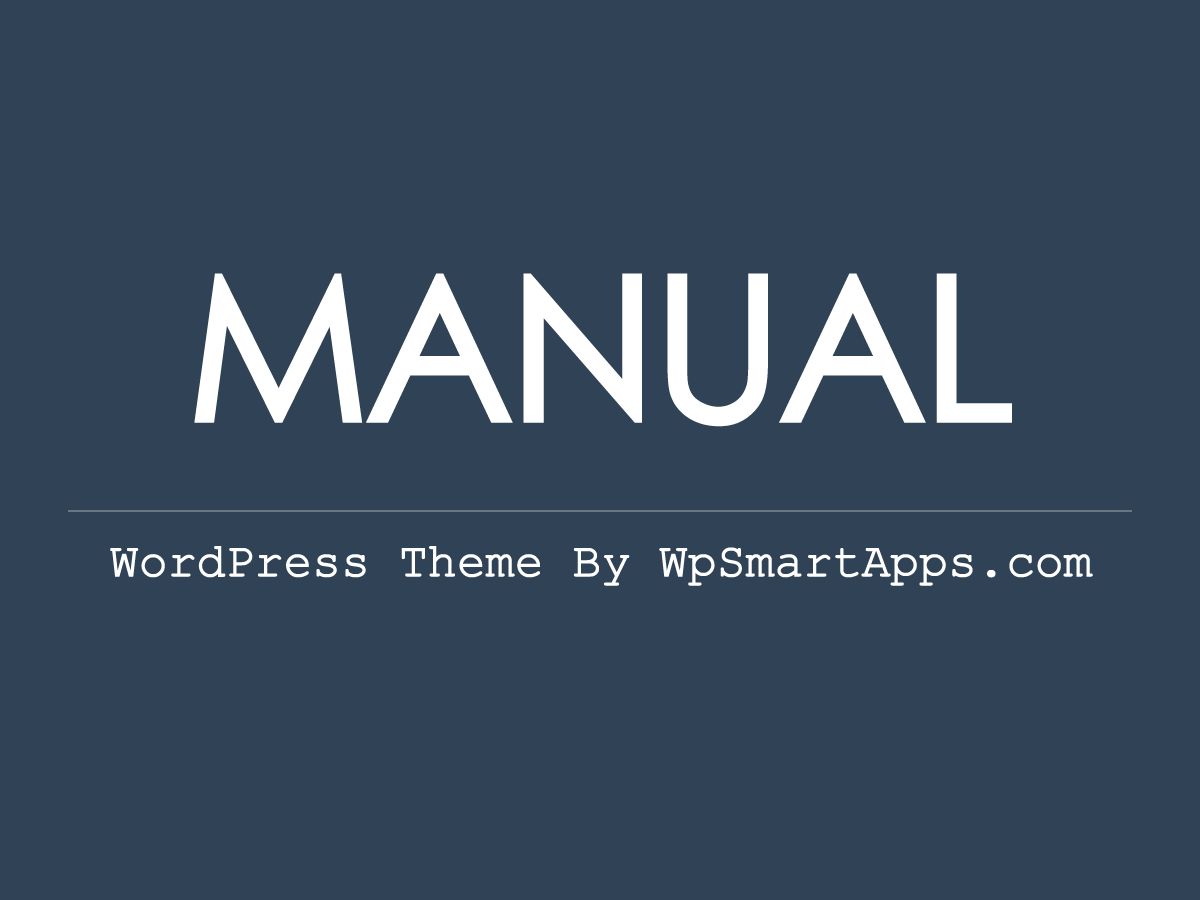
<style>
.page{position:relative;width:1200px;height:900px;background:#304255}
.page>*{position:absolute;margin:0}
.t1{font:200px "CenturyGothic";letter-spacing:-0.05em;color:#ffffff;font-weight:bold}
.t2{font:48px "CourierNewPSMT";letter-spacing:-0.025em;color:#ffffff;font-weight:bold}
</style>
<div class="page">
<p class="t1" style="left:194px;top:273px;width:818px;height:154px">MANUAL</p>
<p class="t2" style="left:110px;top:546px;width:983px;height:40px">WordPress Theme By WpSmartApps.com</p>
</div>
